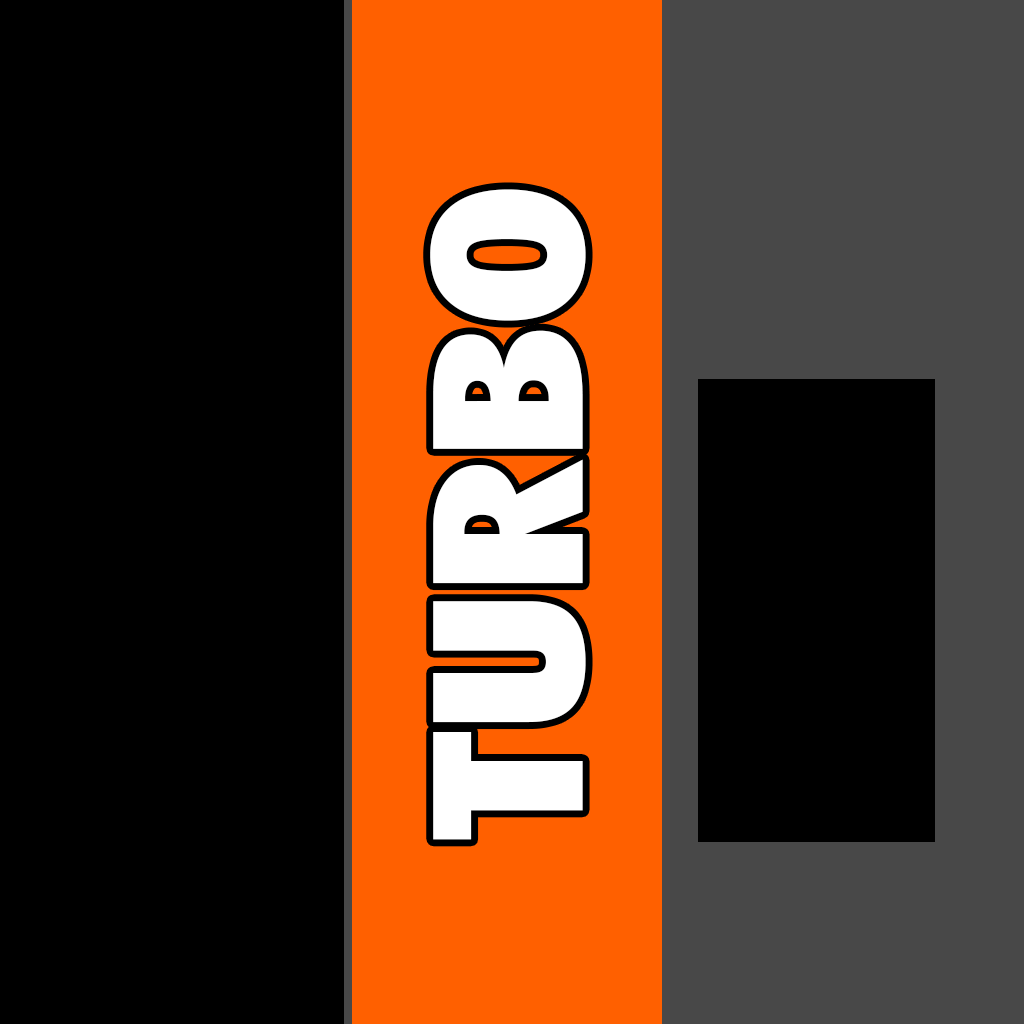
<style>
.page{position:relative;width:1024px;height:1024px;background:#000000}
.page>*{position:absolute;margin:0}
.t1{font:299.2px "FuturaBT-ExtraBlackCondensed";color:#ffffff;font-variant:small-caps;scale:1.17 1}
</style>
<div class="page">
<p class="t1" style="left:430px;top:189px;width:156px;height:651px;rotate:-90deg">turbo</p>
</div>
